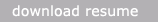
<style>
.page{position:relative;width:158px;height:22px;background:#b3b1b4}
.page>*{position:absolute;margin:0}
.t1{font:14px "Verdana";letter-spacing:0.01em;color:#ffffff}
</style>
<div class="page">
<p class="t1" style="left:12px;top:5px;width:126px;height:12px">download resume</p>
</div>
